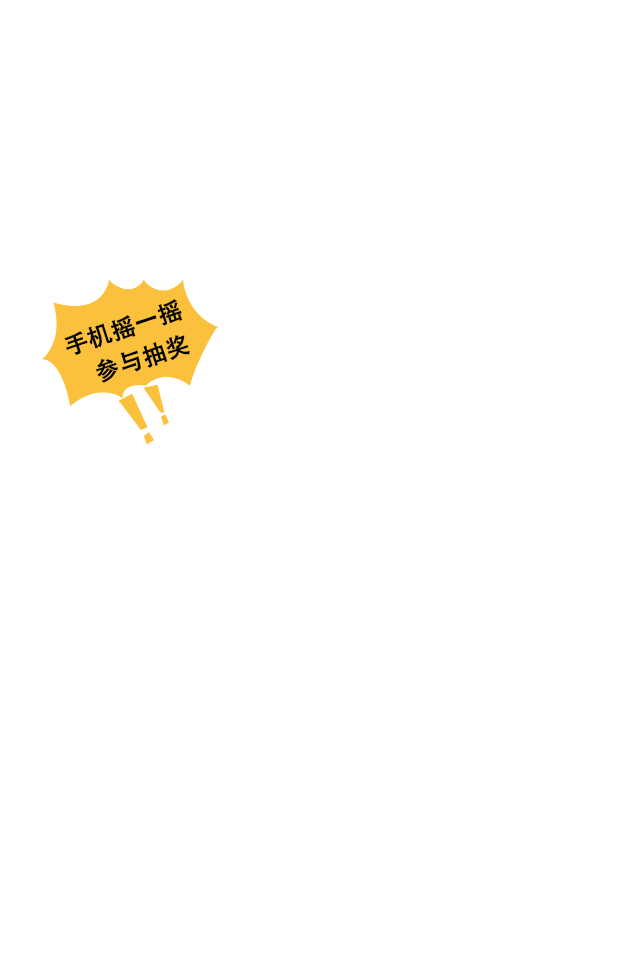
<style>
.page{position:relative;width:640px;height:960px;background:#ffffff}
.page>*{position:absolute;margin:0}
.t1{font:24px "STHeitiSC-Medium";color:#020202;font-weight:bold}
</style>
<div class="page">
<p class="t1" style="left:64px;top:299px;width:118px;height:56px;rotate:-19deg">手机摇一摇</p>
<p class="t1" style="left:96px;top:335px;width:94px;height:48px;rotate:-19deg">参与抽奖</p>
</div>
